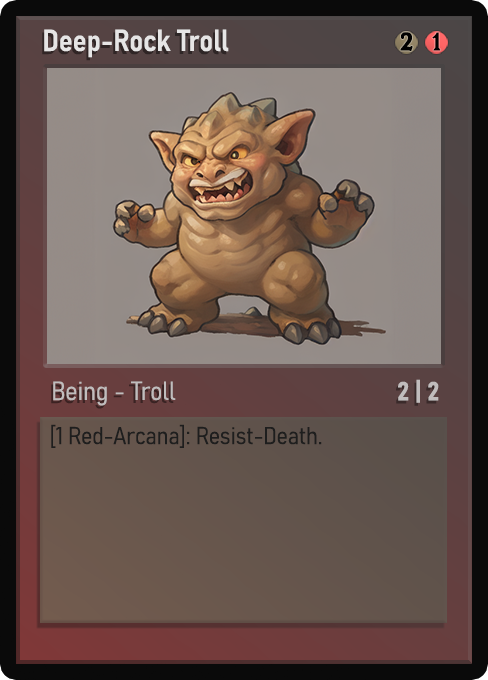
<style>
.page{position:relative;width:488px;height:680px}
.page>*{position:absolute;margin:0}
.t1{font:30px "Bahnschrift-SemiBoldSemiCondensed";color:#f2f2f2;font-weight:bold}
.t2{font:25px "WTRRoycroft";color:#000000;font-weight:bold;scale:1.09 1}
.t3{font:26px "Bahnschrift-LightSemiCondensed";color:#c8c8c8;font-weight:bold}
.t4{font:26px "Bahnschrift-BoldSemiCondensed";color:#c1bdbd;font-weight:bold}
.t5{font:24px "Bahnschrift-LightSemiCondensed";color:#1e1e1e;font-weight:bold}
</style>
<div class="page">
<p class="t1" style="left:44px;top:29px;width:185px;height:29px;opacity:0.9">Deep-Rock Troll</p>
<p class="t2" style="left:400px;top:32px;width:13px;height:19px">2</p>
<p class="t2" style="left:432px;top:32px;width:9px;height:19px">1</p>
<p class="t3" style="left:53px;top:381px;width:123px;height:25px;opacity:0.9">Being - Troll</p>
<p class="t4" style="left:398px;top:379px;width:41px;height:24px">2 | 2</p>
<p class="t5" style="left:51px;top:424px;width:271px;height:24px">[1 Red-Arcana]: Resist-Death.</p>
</div>
